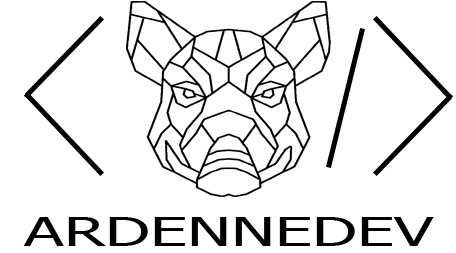
<style>
.page{position:relative;width:456px;height:253px;background:#ffffff}
.page>*{position:absolute;margin:0}
.t1{font:39.6px "Tahoma";color:#000000;scale:1.67 1}
</style>
<div class="page">
<p class="t1" style="left:23px;top:217px;width:411px;height:29px">ARDENNEDEV</p>
</div>
